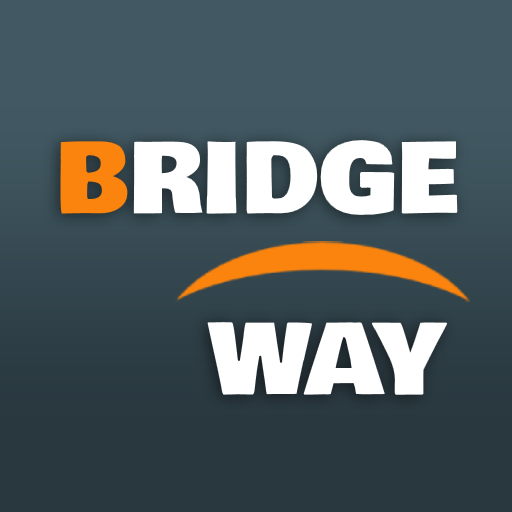
<style>
.page{position:relative;width:512px;height:512px;background:#425963}
.page>*{position:absolute;margin:0}
.t1{font:95.7px "BowlbyOne-Regular";color:#ffffff}
.t2{font:95.7px "BowlbyOne-Regular";color:#fb840e}
</style>
<div class="page">
<p class="t1" style="left:60px;top:140px;width:398px;height:75px"><span class="t2">B</span>RIDGE</p>
<p class="t1" style="left:207px;top:322px;width:241px;height:73px">WAY</p>
</div>
